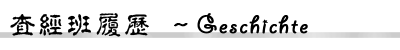
<style>
.page{position:relative;width:400px;height:50px;background:#ffffff}
.page>*{position:absolute;margin:0}
.t1{font:27px "GiddyupStd";letter-spacing:0.06em;color:#000000;font-weight:bold}
.t2{font:27px "¾­µä·±µ­¹Å Regular";letter-spacing:0.06em;color:#000000}
.t3{font:27px "¾­µä·±µ­¹Å Regular";letter-spacing:0.06em;color:#000000;font-weight:bold}
</style>
<div class="page">
<p class="t1" style="left:10px;top:13px;width:298px;height:24px"><span class="t2">查经班履历 </span><span class="t3">～</span>Geschichte</p>
</div>
